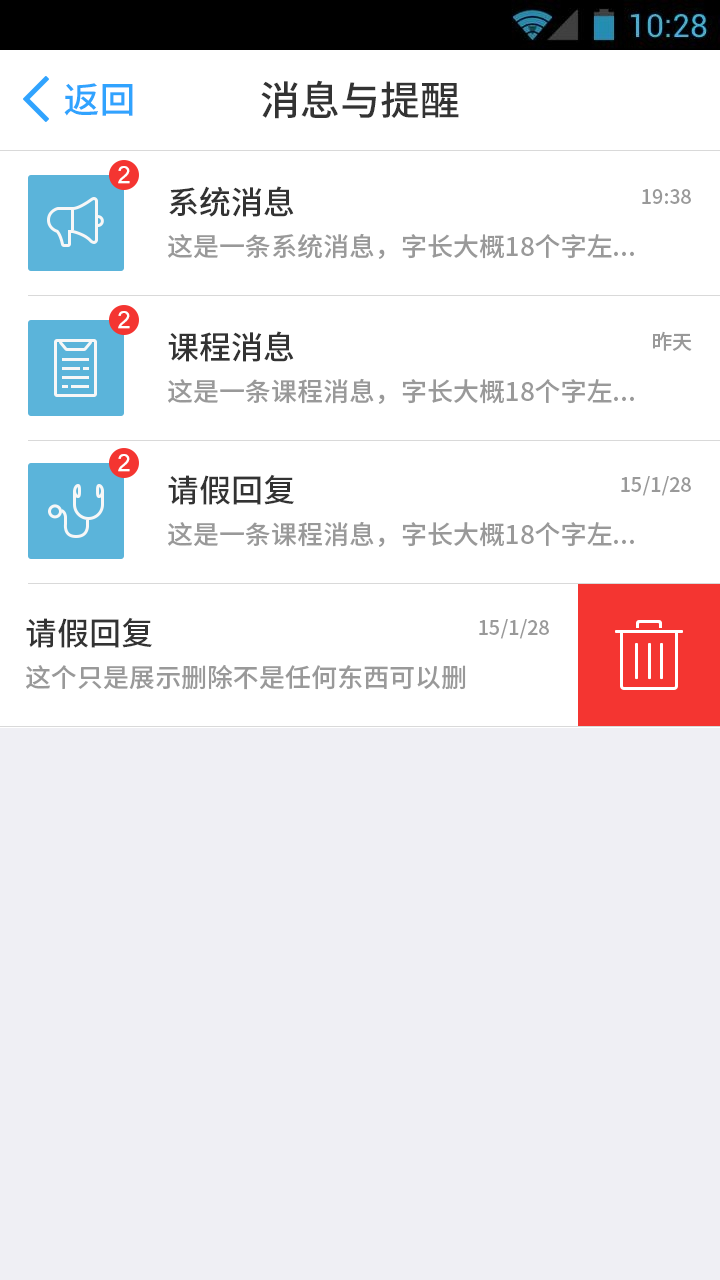
<style>
.page{position:relative;width:720px;height:1280px;background:#efeff4}
.page>*{position:absolute;margin:0}
.t1{font:36.1px "NotoSansHans-Medium";color:#30a3fe}
.t2{font:40px "NotoSansHans-Medium";color:#333333}
.t3{font:24px "ArialMT";letter-spacing:0.02em;color:#ffffff}
.t4{font:25.9px/41.8px "NotoSansHans-Medium";color:#999999}
.t5{font:31.9px/41.8px "NotoSansHans-Medium";color:#333333}
.t6{font:20px "NotoSansHans-Medium";color:#999999}
</style>
<div class="page">
<p class="t1" style="left:64px;top:83px;width:69px;height:33px">返回</p>
<p class="t2" style="left:261px;top:80px;width:198px;height:39px">消息与提醒</p>
<p class="t3" style="left:118px;top:166px;width:12px;height:18px">2</p>
<p class="t4" style="left:168px;top:186px;width:466px;height:73px"><span class="t5">系统消息<br></span>这是一条系统消息，字长大概18个字左...</p>
<p class="t6" style="left:642px;top:189px;width:49px;height:15px">19:38</p>
<p class="t3" style="left:118px;top:311px;width:12px;height:18px">2</p>
<p class="t4" style="left:168px;top:331px;width:466px;height:73px"><span class="t5">课程消息<br></span>这是一条课程消息，字长大概18个字左...</p>
<p class="t6" style="left:653px;top:331px;width:39px;height:20px">昨天</p>
<p class="t3" style="left:118px;top:454px;width:12px;height:18px">2</p>
<p class="t4" style="left:168px;top:474px;width:466px;height:73px"><span class="t5">请假回复<br></span>这是一条课程消息，字长大概18个字左...</p>
<p class="t6" style="left:621px;top:476px;width:70px;height:20px">15/1/28</p>
<p class="t4" style="left:26px;top:617px;width:440px;height:73px"><span class="t5">请假回复<br></span>这个只是展示删除不是任何东西可以删</p>
<p class="t6" style="left:479px;top:619px;width:70px;height:20px">15/1/28</p>
</div>
